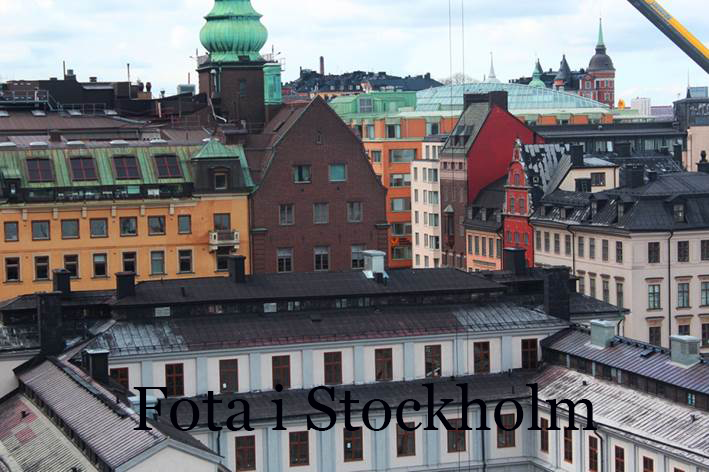
<style>
.page{position:relative;width:709px;height:472px}
.page>*{position:absolute;margin:0}
.t1{font:62.5px "Georgia";color:#010109}
</style>
<div class="page">
<p class="t1" style="left:133px;top:383px;width:465px;height:48px">Fota i Stockholm</p>
</div>
